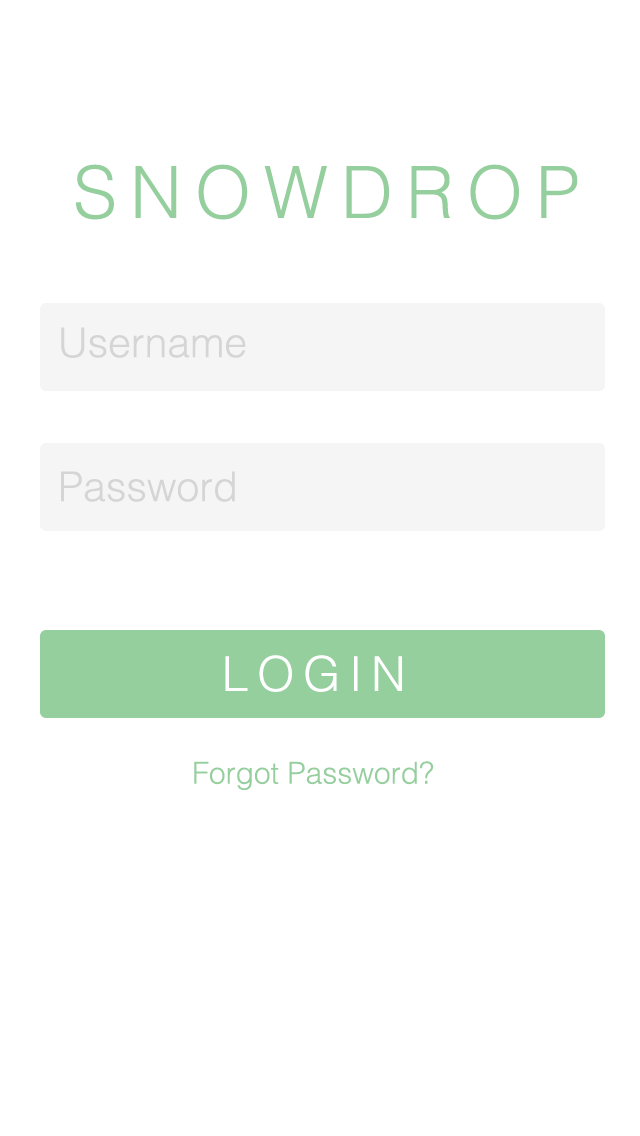
<style>
.page{position:relative;width:640px;height:1136px;background:#ffffff}
.page>*{position:absolute;margin:0}
.t1{font:72px "Helvetica-Light";letter-spacing:0.18em;color:#95cf9e}
.t2{font:41px "Helvetica-Light";color:#d5d5d5}
.t3{font:48px "Helvetica-Light";letter-spacing:0.18em;color:#ffffff}
.t4{font:30px "Helvetica-Light";color:#95cf9e}
</style>
<div class="page">
<p class="t1" style="left:76px;top:164px;width:502px;height:56px">SNOWDROP</p>
<p class="t1" style="left:76px;top:164px;width:502px;height:56px">SNOWDROP</p>
<p class="t2" style="left:61px;top:327px;width:185px;height:31px">Username</p>
<p class="t2" style="left:61px;top:471px;width:174px;height:31px">Password</p>
<p class="t3" style="left:225px;top:655px;width:177px;height:37px">LOGIN</p>
<p class="t4" style="left:194px;top:761px;width:240px;height:29px">Forgot Password?</p>
</div>
